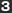
<style>
.page{position:relative;width:12px;height:13px}
.page>*{position:absolute;margin:0}
.t1{font:13.9px "K2D-ExtraBold";color:#ffffff}
</style>
<div class="page">
<p class="t1" style="left:1px;top:1px;width:9px;height:11px">3</p>
</div>
